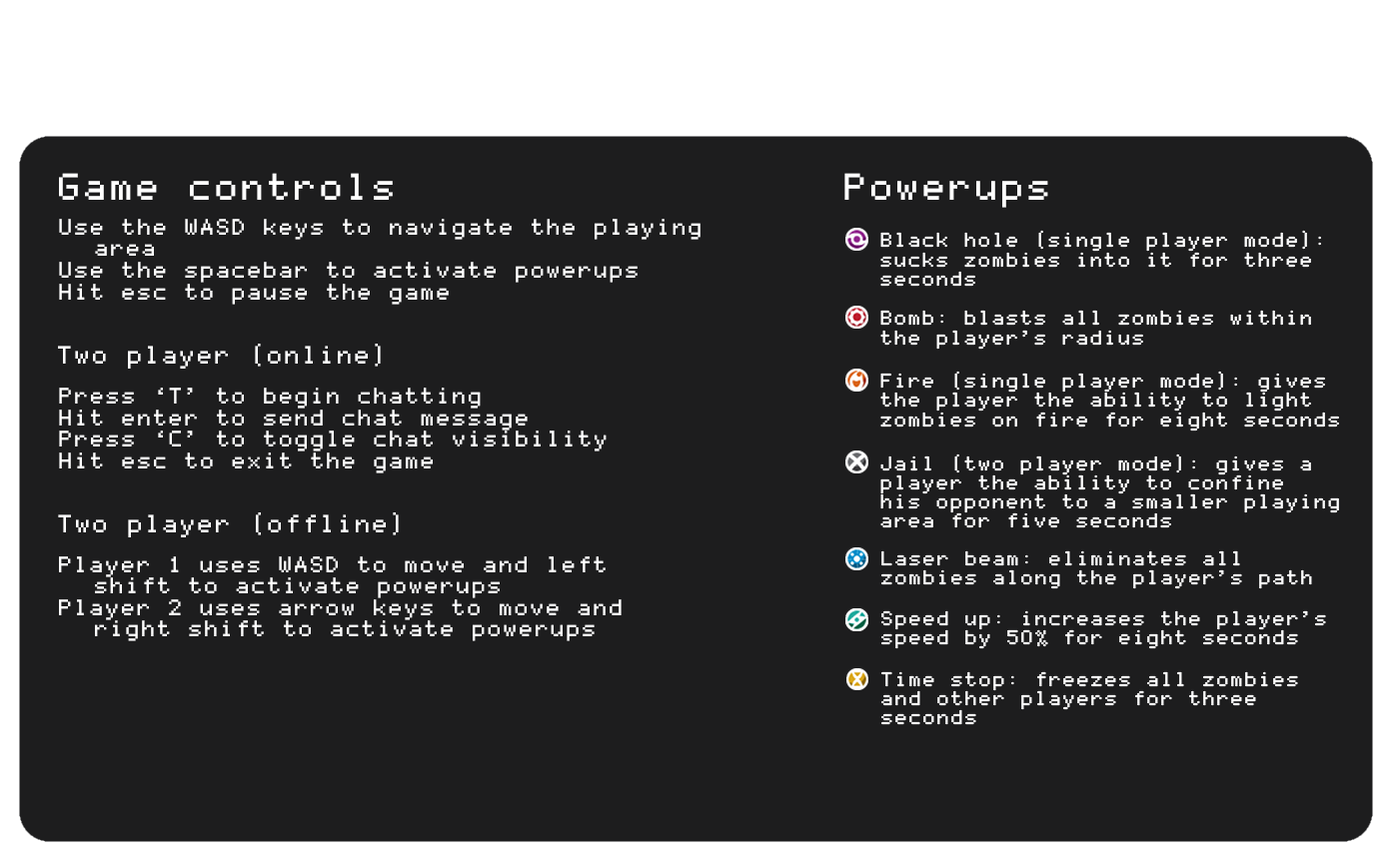
<style>
.page{position:relative;width:1389px;height:858px;background:#1d1d1e}
.page>*{position:absolute;margin:0}
.t1{font:30px "Mono0756";color:#ffffff}
.t2{font:18px "Mono0756";color:#ffffff}
.t3{font:16px "Mono0756";color:#ffffff}
.t4{font:20px "Mono0756";color:#ffffff}
</style>
<div class="page">
<p class="t1" style="left:59px;top:173px;width:334px;height:27px">Game controls</p>
<p class="t1" style="left:844px;top:173px;width:204px;height:35px">Powerups</p>
<p class="t2" style="left:59px;top:219px;width:642px;height:86px">Use the WASD keys to navigate the playing<br> area <br>Use the spacebar to activate powerups<br>Hit esc to pause the game</p>
<p class="t3" style="left:880px;top:230px;width:441px;height:57px">Black hole (single player mode): <br>sucks zombies into it for three <br>seconds</p>
<p class="t3" style="left:880px;top:310px;width:431px;height:40px">Bomb: blasts all zombies within <br>the player’s radius</p>
<p class="t4" style="left:58px;top:344px;width:323px;height:25px">Two player (online)</p>
<p class="t3" style="left:880px;top:371px;width:459px;height:61px">Fire (single player mode): gives <br>the player the ability to light <br>zombies on fire for eight seconds</p>
<p class="t2" style="left:59px;top:388px;width:548px;height:86px">Press ‘T’ to begin chatting<br>Hit enter to send chat message<br>Press ‘C’ to toggle chat visibility<br>Hit esc to exit the game</p>
<p class="t3" style="left:880px;top:454px;width:459px;height:75px">Jail (two player mode): gives a <br>player the ability to confine <br>his opponent to a smaller playing <br>area for five seconds</p>
<p class="t4" style="left:58px;top:513px;width:341px;height:25px">Two player (offline)</p>
<p class="t2" style="left:59px;top:557px;width:563px;height:85px">Player 1 uses WASD to move and left <br> shift to activate powerups<br>Player 2 uses arrow keys to move and <br> right shift to activate powerups</p>
<p class="t3" style="left:881px;top:551px;width:431px;height:39px">Laser beam: eliminates all <br>zombies along the player’s path</p>
<p class="t3" style="left:881px;top:611px;width:445px;height:39px">Speed up: increases the player’s <br>speed by 50% for eight seconds</p>
<p class="t3" style="left:881px;top:672px;width:417px;height:54px">Time stop: freezes all zombies <br>and other players for three <br>seconds</p>
</div>
